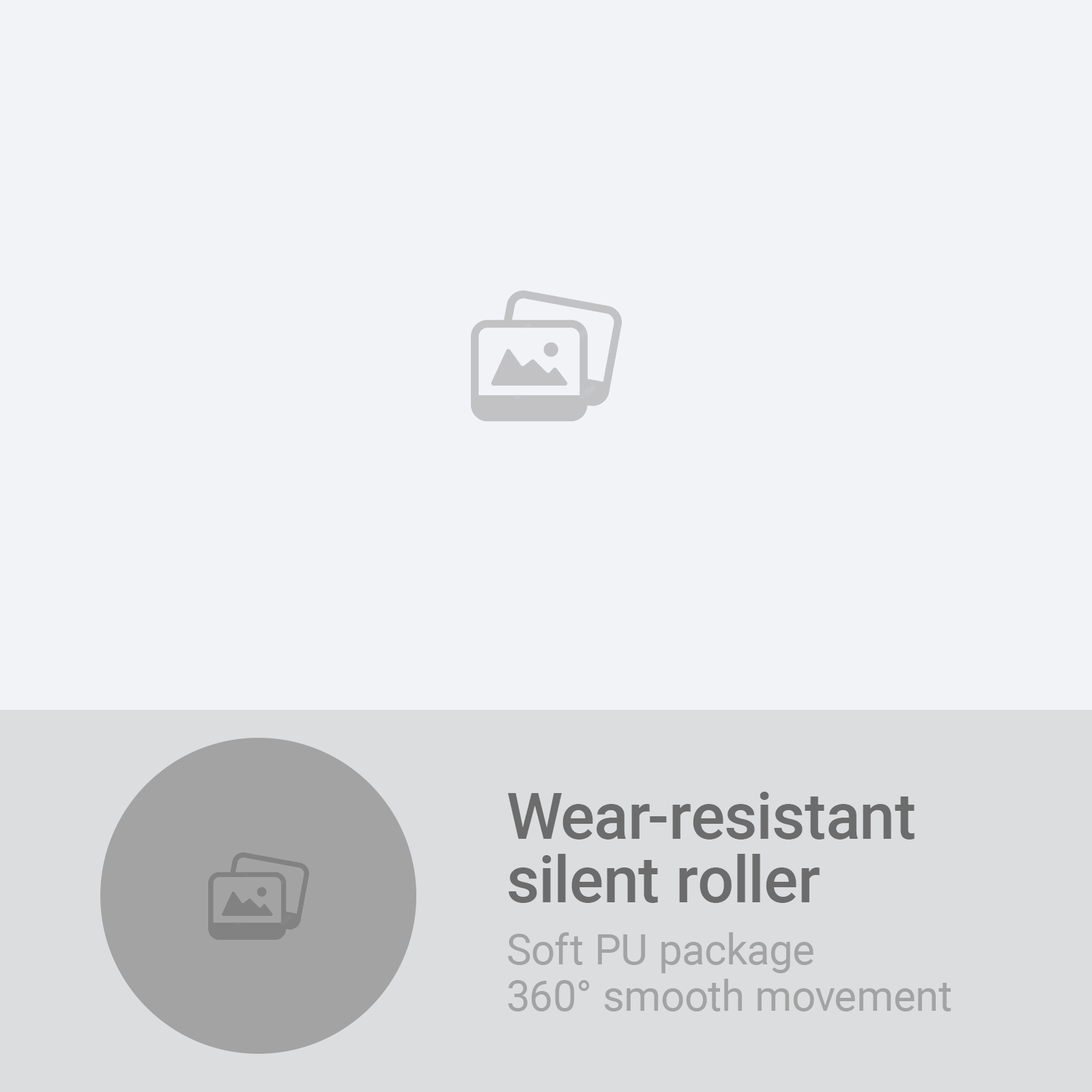
<style>
.page{position:relative;width:1092px;height:1092px;background:#f2f3f6}
.page>*{position:absolute;margin:0}
.t1{font:64.1px/64.1px "Roboto-Medium";color:#6c6c6c}
.t2{font:42.2px/46.4px "Roboto-Regular";color:#a3a3a3}
</style>
<div class="page">
<p class="t1" style="left:508px;top:792px;width:407px;height:111px">Wear-resistant <br>silent roller</p>
<p class="t2" style="left:508px;top:932px;width:443px;height:79px">Soft PU package<br>360° smooth movement</p>
</div>
